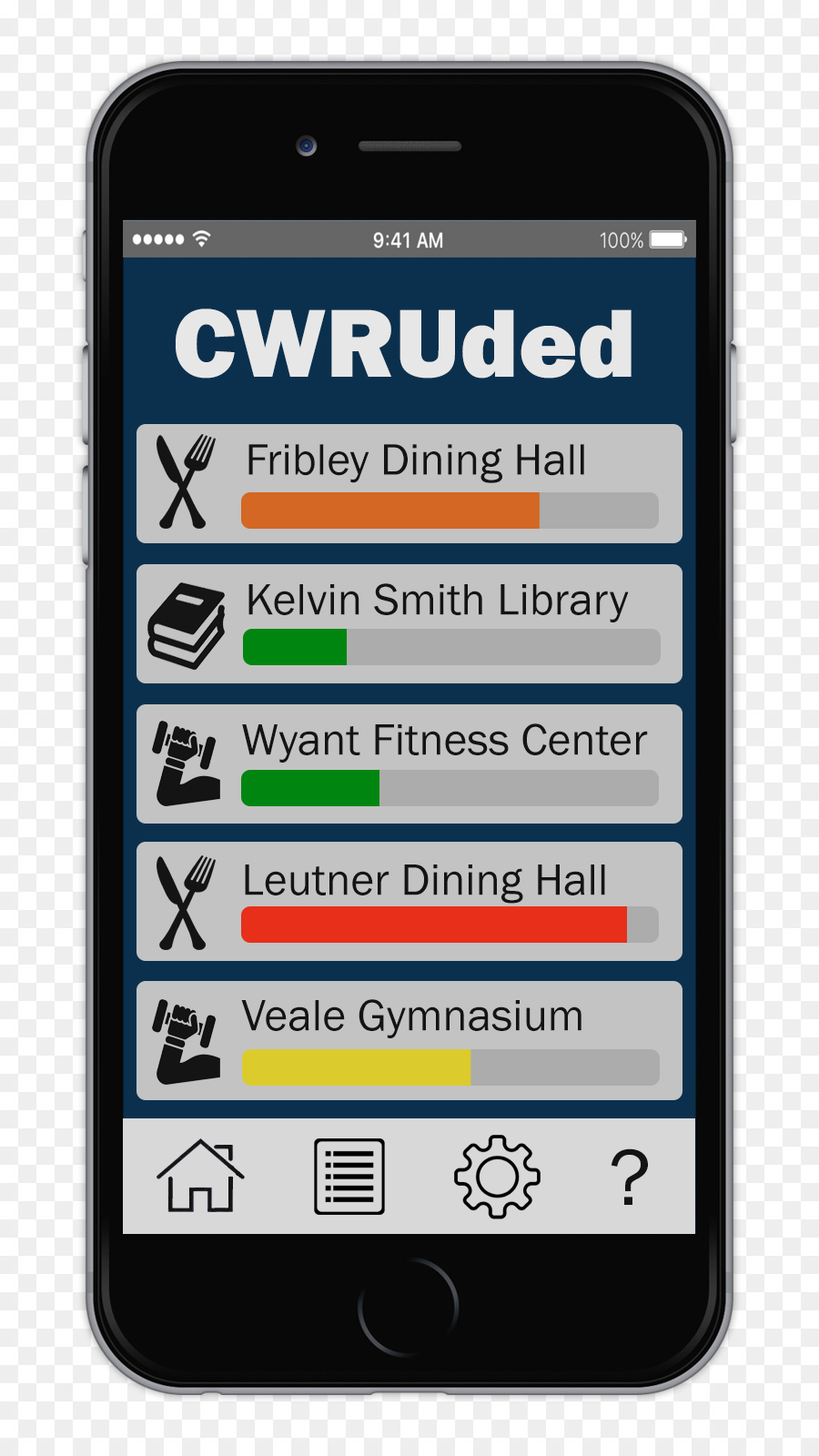
<style>
.page{position:relative;width:819px;height:1456px}
.page>*{position:absolute;margin:0}
.t1{font:100.1px "FranklinGothic-Heavy";color:#e7e7e7}
.t2{font:45.5px "FranklinGothic-Book";color:#141414}
.t3{font:81.9px "FranklinGothic-Book";color:#141414}
</style>
<div class="page">
<p class="t1" style="left:176px;top:308px;width:456px;height:71px">CWRUded</p>
<p class="t2" style="left:248px;top:444px;width:336px;height:39px">Fribley Dining Hall</p>
<p class="t2" style="left:248px;top:583px;width:381px;height:39px">Kelvin Smith Library</p>
<p class="t2" style="left:242px;top:723px;width:406px;height:40px">Wyant Fitness Center</p>
<p class="t2" style="left:245px;top:864px;width:360px;height:40px">Leutner Dining Hall</p>
<p class="t2" style="left:241px;top:999px;width:340px;height:39px">Veale Gymnasium</p>
<p class="t3" style="left:611px;top:1148px;width:37px;height:57px">?</p>
</div>
